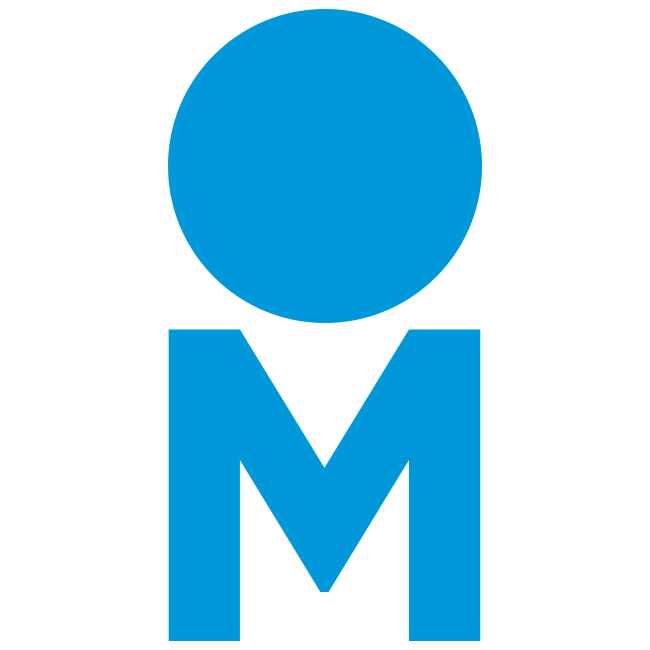
<style>
.page{position:relative;width:650px;height:650px;background:#ffffff}
.page>*{position:absolute;margin:0}
.t1{font:445px "Gilroy-ExtraBold";letter-spacing:0.05em;color:#0098da}
</style>
<div class="page">
<p class="t1" style="left:168px;top:329px;width:313px;height:312px">M</p>
</div>
